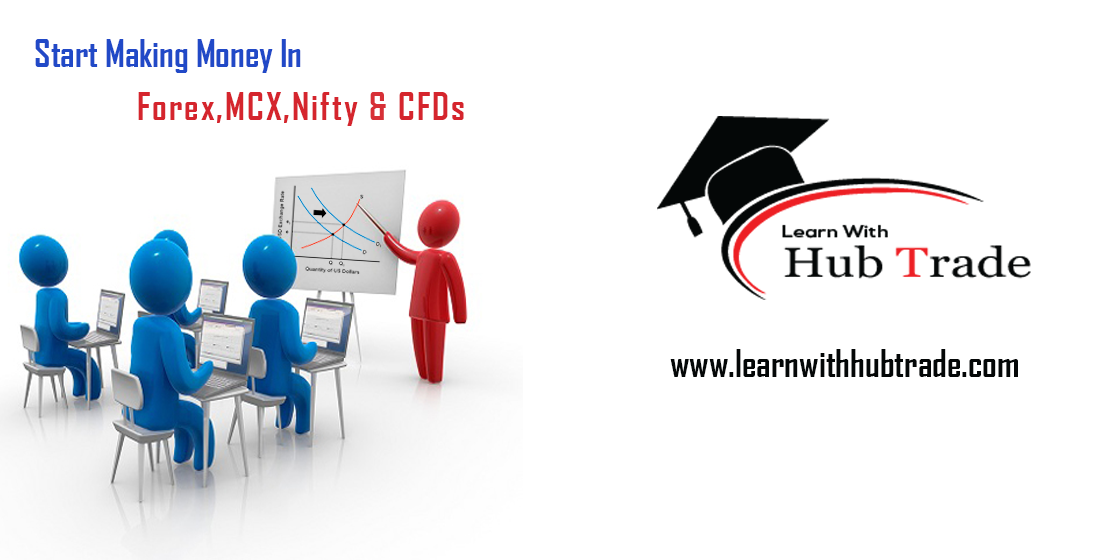
<style>
.page{position:relative;width:1120px;height:560px;background:#ffffff}
.page>*{position:absolute;margin:0}
.t1{font:35.7px "AgencyFB-Bold";color:#2149c7}
.t2{font:35.7px/53px "AgencyFB-Bold";letter-spacing:0.06em;color:#d5252d}
.t3{font:35.7px/53px "AgencyFB-Bold";letter-spacing:0.06em;color:#d73037}
.t4{font:36px "AgencyFB-Bold";color:#040707}
</style>
<div class="page">
<p class="t1" style="left:35px;top:39px;width:429px;height:87px">Start Making Money In <br><span class="t2">Forex,MCX,Nifty </span><span class="t3">&amp;</span><span class="t2"> CFDs</span></p>
<p class="t4" style="left:670px;top:349px;width:348px;height:28px">www.learnwithhubtrade.com</p>
</div>
